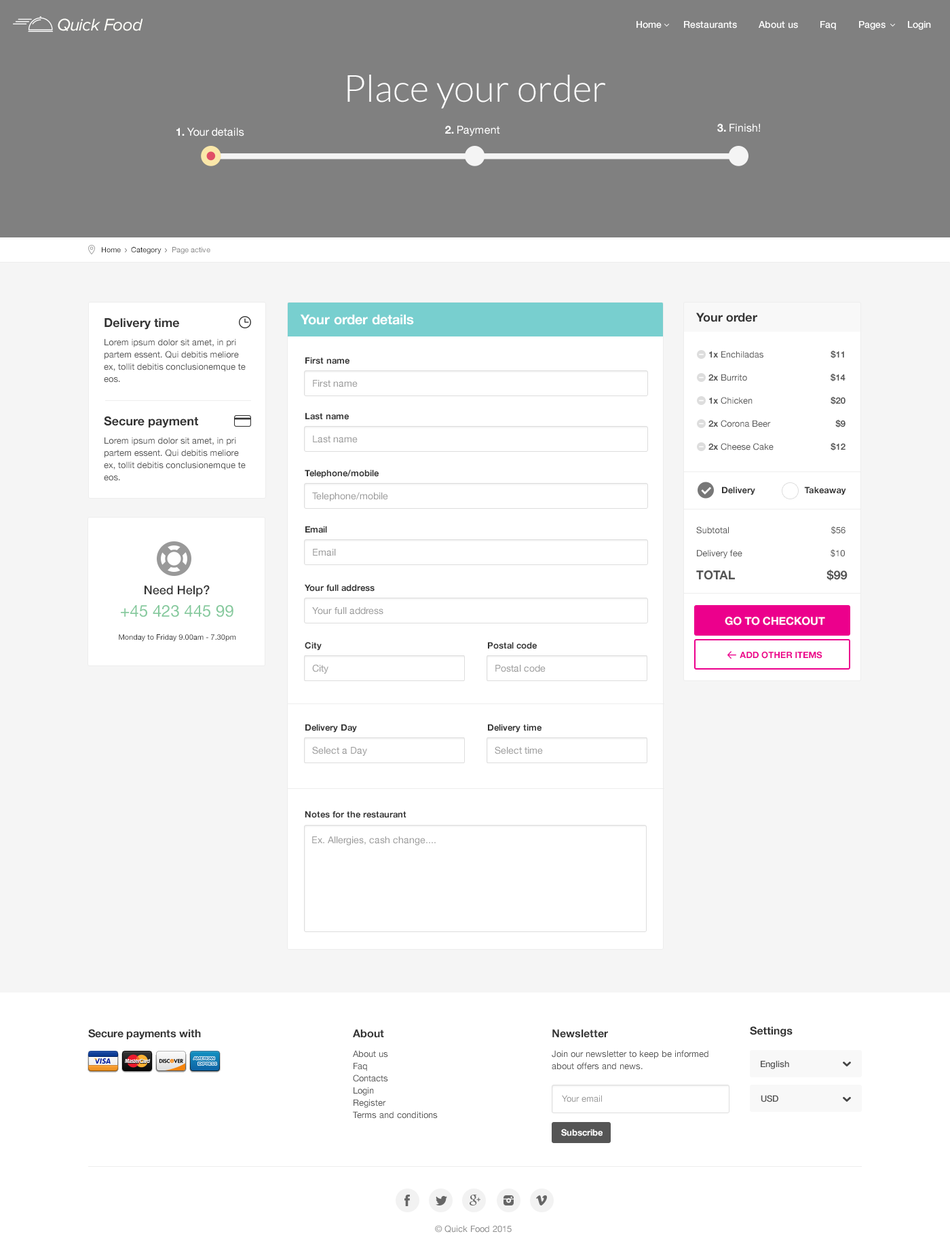
<style>
.page{position:relative;width:950px;height:1255px;background:#ffffff}
.page>*{position:absolute;margin:0}
.t1{font:17.6px "ProximaNova-RegularIt";letter-spacing:-0.025em;color:#fefef9}
.t2{font:9.5px "HelveticaNeue-Medium";color:#ffffff}
.t3{font:37.3px "Lato-Light";color:#ffffff}
.t4{font:10.9px "HelveticaNeue";color:#ffffff}
.t5{font:10.9px "HelveticaNeue-Bold";color:#ffffff}
.t6{font:7.5px "HelveticaNeue";color:#252525}
.t7{font:7.5px "HelveticaNeue";color:#888888}
.t8{font:13.6px "HelveticaNeue-Bold";color:#ffffff}
.t9{font:12.2px "HelveticaNeue-Bold";color:#333333}
.t10{font:8.8px/12.2px "HelveticaNeue";color:#555555}
.t11{font:8.8px/23.1px "HelveticaNeue-Bold";color:#555555}
.t12{font:8.8px/23.1px "HelveticaNeue";color:#555555}
.t13{font:8.8px "HelveticaNeue-Bold";color:#333333}
.t14{font:9.5px "HelveticaNeue";color:#999999}
.t15{font:12.2px/23.1px "HelveticaNeue-Bold";color:#555555}
.t16{font:12.2px "HelveticaNeue-Medium";color:#333333}
.t17{font:16.3px "HelveticaNeue";color:#85c99d}
.t18{font:7.5px "HelveticaNeue";color:#333333}
.t19{font:8.8px "HelveticaNeue-Bold";color:#ec008c}
.t20{font:10.9px "HelveticaNeue-Bold";color:#333333}
.t21{font:8.8px "HelveticaNeue-Medium";color:#555555}
.t22{font:8.8px "HelveticaNeue";color:#999999}
.t23{font:8.8px "HelveticaNeue-Bold";color:#ffffff}
.t24{font:8.8px "HelveticaNeue";color:#8c8c8c}
</style>
<div class="page">
<p class="t1" style="left:58px;top:18px;width:85px;height:13px">Quick Food</p>
<p class="t2" style="left:636px;top:21px;width:295px;height:9px">Home        Restaurants        About us        Faq        Pages        Login</p>
<p class="t3" style="left:347px;top:75px;width:258px;height:34px">Place your order</p>
<p class="t4" style="left:445px;top:126px;width:55px;height:10px"><span class="t5">2.</span> Payment</p>
<p class="t4" style="left:717px;top:123px;width:43px;height:9px"><span class="t5">3.</span> Finish!</p>
<p class="t4" style="left:176px;top:128px;width:68px;height:8px"><span class="t5">1.</span> Your details</p>
<p class="t6" style="left:102px;top:247px;width:108px;height:7px">Home     Category     <span class="t7">Page active</span></p>
<p class="t8" style="left:300px;top:314px;width:114px;height:11px">Your order details</p>
<p class="t9" style="left:695px;top:313px;width:62px;height:9px">Your order</p>
<p class="t9" style="left:104px;top:318px;width:75px;height:12px">Delivery time</p>
<p class="t10" style="left:104px;top:339px;width:142px;height:44px">Lorem ipsum dolor sit amet, in pri partem essent. Qui debitis meliore ex, tollit debitis conclusionemque te eos.</p>
<p class="t11" style="left:708px;top:350px;width:137px;height:101px"><span class="t12">     </span>1x<span class="t12"> Enchiladas                 </span>$11<br>     2x<span class="t12"> Burrito       </span> $14<br>     1x<span class="t12"> Chicken                          </span>$20<br>     2x<span class="t12"> Corona Beer                  </span>$9<br>     2x<span class="t12"> Cheese Cake               </span> $12</p>
<p class="t13" style="left:305px;top:357px;width:44px;height:7px">First name</p>
<p class="t14" style="left:313px;top:380px;width:45px;height:7px">First name</p>
<p class="t13" style="left:305px;top:413px;width:44px;height:7px">Last name</p>
<p class="t9" style="left:104px;top:416px;width:94px;height:12px">Secure payment</p>
<p class="t10" style="left:104px;top:437px;width:142px;height:44px">Lorem ipsum dolor sit amet, in pri partem essent. Qui debitis meliore ex, tollit debitis conclusionemque te eos.</p>
<p class="t14" style="left:313px;top:436px;width:45px;height:7px">Last name</p>
<p class="t13" style="left:305px;top:470px;width:74px;height:8px">Telephone/mobile</p>
<p class="t14" style="left:312px;top:492px;width:76px;height:9px">Telephone/mobile</p>
<p class="t13" style="left:722px;top:487px;width:124px;height:8px">Delivery           Takeaway</p>
<p class="t13" style="left:305px;top:526px;width:22px;height:7px">Email</p>
<p class="t12" style="left:696px;top:526px;width:151px;height:55px">Subtotal                                     $56<br>Delivery fee                                    $10<br><span class="t15">TOTAL                           $99</span></p>
<p class="t14" style="left:313px;top:549px;width:23px;height:7px">Email</p>
<p class="t16" style="left:145px;top:585px;width:65px;height:12px">Need Help?</p>
<p class="t13" style="left:304px;top:584px;width:71px;height:8px">Your full address</p>
<p class="t17" style="left:121px;top:605px;width:112px;height:12px">+45 423 445 99</p>
<p class="t14" style="left:312px;top:607px;width:71px;height:8px">Your full address</p>
<p class="t5" style="left:725px;top:617px;width:100px;height:9px">GO TO CHECKOUT</p>
<p class="t18" style="left:119px;top:634px;width:117px;height:8px">Monday to Friday 9.00am - 7.30pm</p>
<p class="t13" style="left:305px;top:642px;width:17px;height:9px">City</p>
<p class="t13" style="left:488px;top:642px;width:49px;height:7px">Postal code</p>
<p class="t19" style="left:740px;top:651px;width:82px;height:8px">ADD OTHER ITEMS</p>
<p class="t14" style="left:312px;top:664px;width:16px;height:10px">City</p>
<p class="t14" style="left:495px;top:665px;width:51px;height:7px">Postal code</p>
<p class="t13" style="left:305px;top:724px;width:52px;height:9px">Delivery Day</p>
<p class="t13" style="left:488px;top:724px;width:53px;height:9px">Delivery time</p>
<p class="t14" style="left:312px;top:746px;width:55px;height:10px">Select a Day</p>
<p class="t14" style="left:495px;top:746px;width:48px;height:9px">Select time</p>
<p class="t13" style="left:305px;top:811px;width:101px;height:7px">Notes for the restaurant</p>
<p class="t14" style="left:312px;top:837px;width:124px;height:8px">Ex. Allergies, cash change....</p>
<p class="t20" style="left:88px;top:1029px;width:113px;height:11px">Secure payments with</p>
<p class="t20" style="left:353px;top:1029px;width:31px;height:9px">About</p>
<p class="t20" style="left:552px;top:1029px;width:56px;height:9px">Newsletter</p>
<p class="t20" style="left:750px;top:1027px;width:43px;height:10px">Settings</p>
<p class="t10" style="left:353px;top:1050px;width:85px;height:69px">About us<br>Faq<br>Contacts<br>Login<br>Register<br>Terms and conditions</p>
<p class="t10" style="left:552px;top:1050px;width:156px;height:20px">Join our newsletter to keep be informed about offers and news.</p>
<p class="t21" style="left:761px;top:1061px;width:28px;height:8px">English</p>
<p class="t22" style="left:562px;top:1095px;width:40px;height:8px">Your email</p>
<p class="t21" style="left:761px;top:1095px;width:17px;height:8px">USD</p>
<p class="t23" style="left:561px;top:1129px;width:42px;height:8px">Subscribe</p>
<p class="t24" style="left:435px;top:1225px;width:77px;height:8px">© Quick Food 2015</p>
</div>
